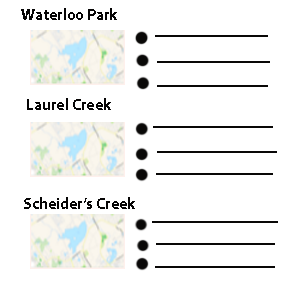
<style>
.page{position:relative;width:283px;height:283px;background:#ffffff}
.page>*{position:absolute;margin:0}
.t1{font:16px "MyriadPro-Bold";color:#060505}
.t2{font:16px "MyriadPro-Regular";color:#060505}
.t3{font:30px "MyriadPro-Regular";color:#060505}
</style>
<div class="page">
<p class="t1" style="left:21px;top:8px;width:96px;height:12px">Waterloo Park <span class="t2">Par</span><span class="t3">ParkPArPark</span></p>
<p class="t1" style="left:27px;top:98px;width:84px;height:12px">Laurel Creek</p>
</div>
